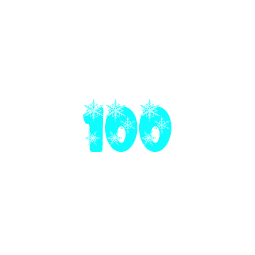
<style>
.page{position:relative;width:255px;height:255px;background:#ffffff}
.page>*{position:absolute;margin:0}
.t1{font:72px "winterflakes";color:#0ffcff}
</style>
<div class="page">
<p class="t1" style="left:83px;top:99px;width:89px;height:53px">100</p>
</div>
